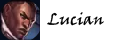
<style>
.page{position:relative;width:140px;height:40px;background:#ffffff}
.page>*{position:absolute;margin:0}
.t1{font:12px "VinerHandITC";color:#000000}
</style>
<div class="page">
<p class="t1" style="left:47px;top:12px;width:57px;height:14px">Lucian</p>
</div>
